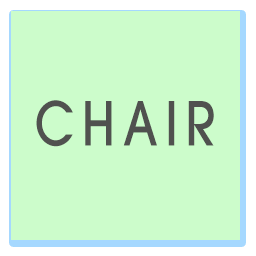
<style>
.page{position:relative;width:256px;height:256px;background:#ccfccb}
.page>*{position:absolute;margin:0}
.t1{font:60px "AvantGarde-Medium";letter-spacing:0.15em;color:#50514f;text-transform:uppercase;scale:0.84 1}
</style>
<div class="page">
<p class="t1" style="left:36px;top:100px;width:178px;height:47px">CHAIR</p>
</div>
